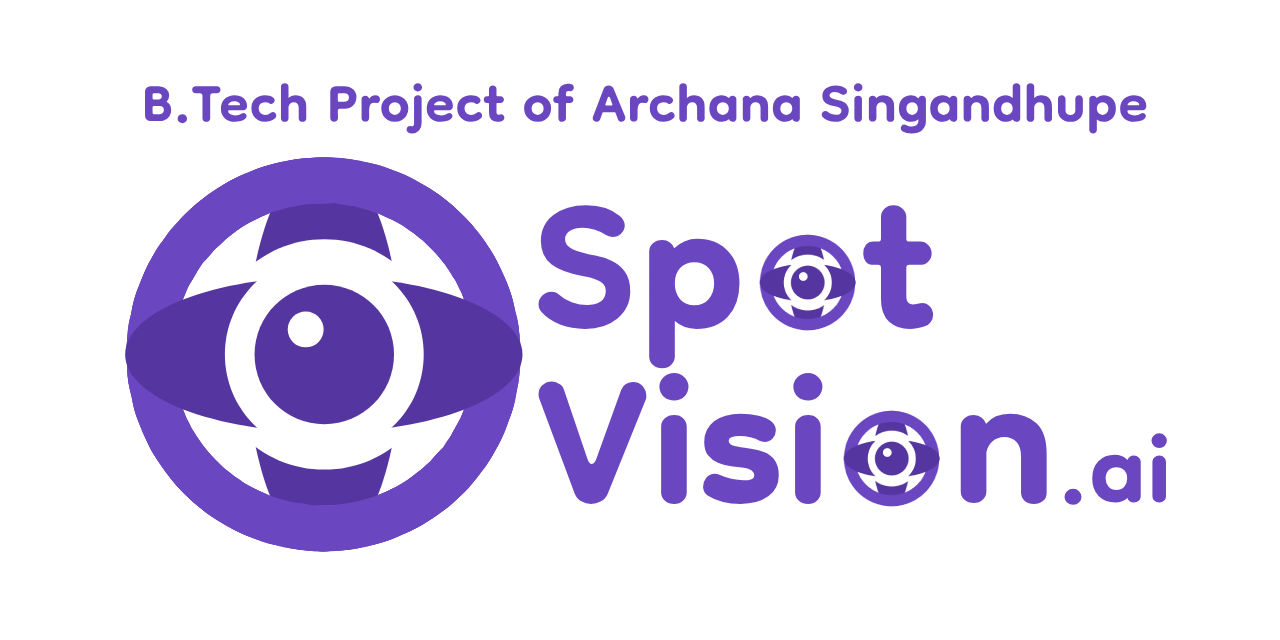
<style>
.page{position:relative;width:1280px;height:640px;background:#ffffff}
.page>*{position:absolute;margin:0}
.t1{font:85.8px "Dongle-Bold";color:#6b46c1}
.t2{font:291.2px/175.8px "Dongle-Bold";color:#6b46c1}
.t3{font:291.2px "Dongle-Bold";color:#6b46c1}
.t4{font:153.9px/175.8px "Dongle-Bold";color:#6b46c1}
</style>
<div class="page">
<p class="t1" style="left:145px;top:83px;width:1002px;height:51px">B.Tech Project of Archana Singandhupe</p>
<p class="t2" style="left:538px;top:205px;width:629px;height:300px"><span class="t3">Sp  t<br></span>Visi  n<span class="t4">.ai</span></p>
</div>
